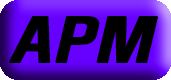
<style>
.page{position:relative;width:171px;height:80px;background:#000000}
.page>*{position:absolute;margin:0}
.t1{font:53px "H2hdrM";color:#000000;font-weight:bold;font-style:italic;scale:1.35 1}
</style>
<div class="page">
<p class="t1" style="left:9px;top:16px;width:149px;height:47px">APM</p>
</div>
